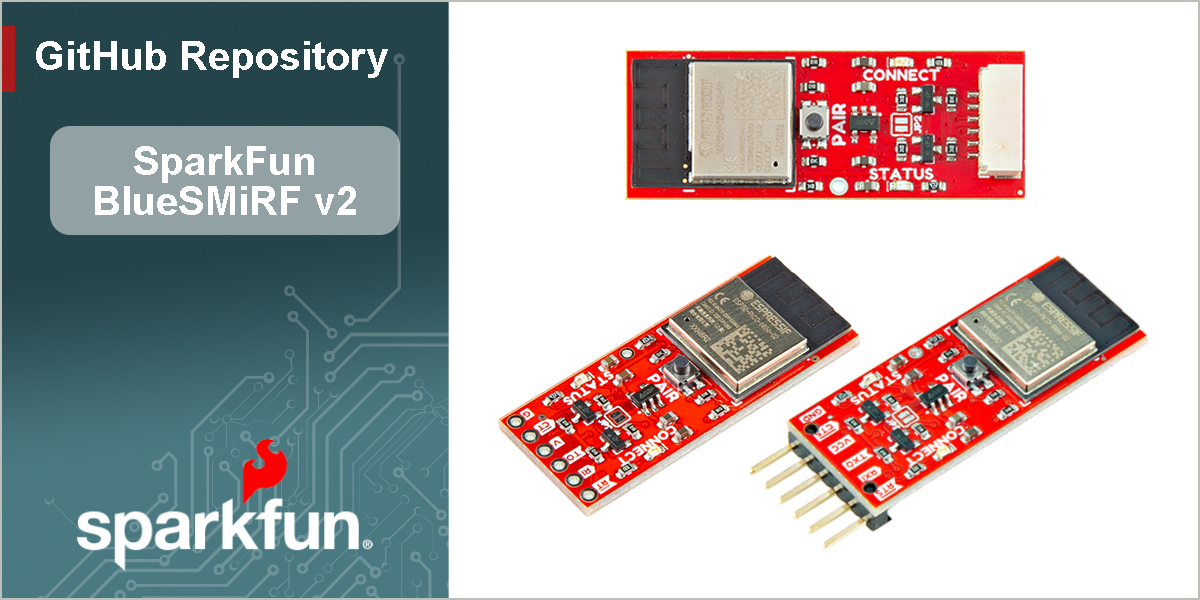
<style>
.page{position:relative;width:1200px;height:600px;background:#ffffff}
.page>*{position:absolute;margin:0}
.t1{font:40px "Arial-BoldMT";color:#ffffff}
</style>
<div class="page">
<p class="t1" style="left:36px;top:41px;width:352px;height:37px">GitHub Repository</p>
<p class="t1" style="left:95px;top:146px;width:261px;height:69px;text-align:center">SparkFun<br>BlueSMiRF v2</p>
</div>
